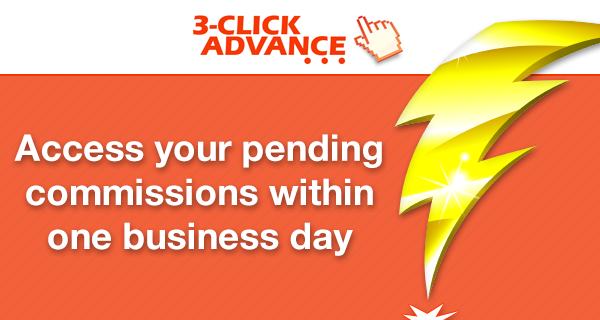
<style>
.page{position:relative;width:600px;height:320px;background:#f2613a}
.page>*{position:absolute;margin:0}
.t1{font:36.8px "HelveticaNeue-Bold";color:#ffffff}
</style>
<div class="page">
<p class="t1" style="left:14px;top:134px;width:368px;height:122px;text-align:center">Access your pending<br>commissions within<br>one business day</p>
</div>
